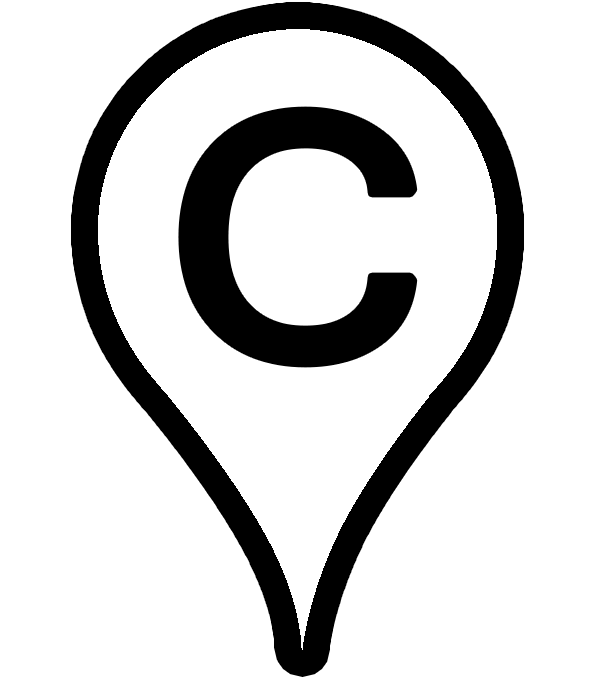
<style>
.page{position:relative;width:595px;height:680px;background:#ffffff}
.page>*{position:absolute;margin:0}
.t1{font:333.4px "MicrosoftSansSerif";color:#000000;font-weight:bold;scale:1.08 1}
</style>
<div class="page">
<p class="t1" style="left:182px;top:110px;width:232px;height:254px">C</p>
</div>
